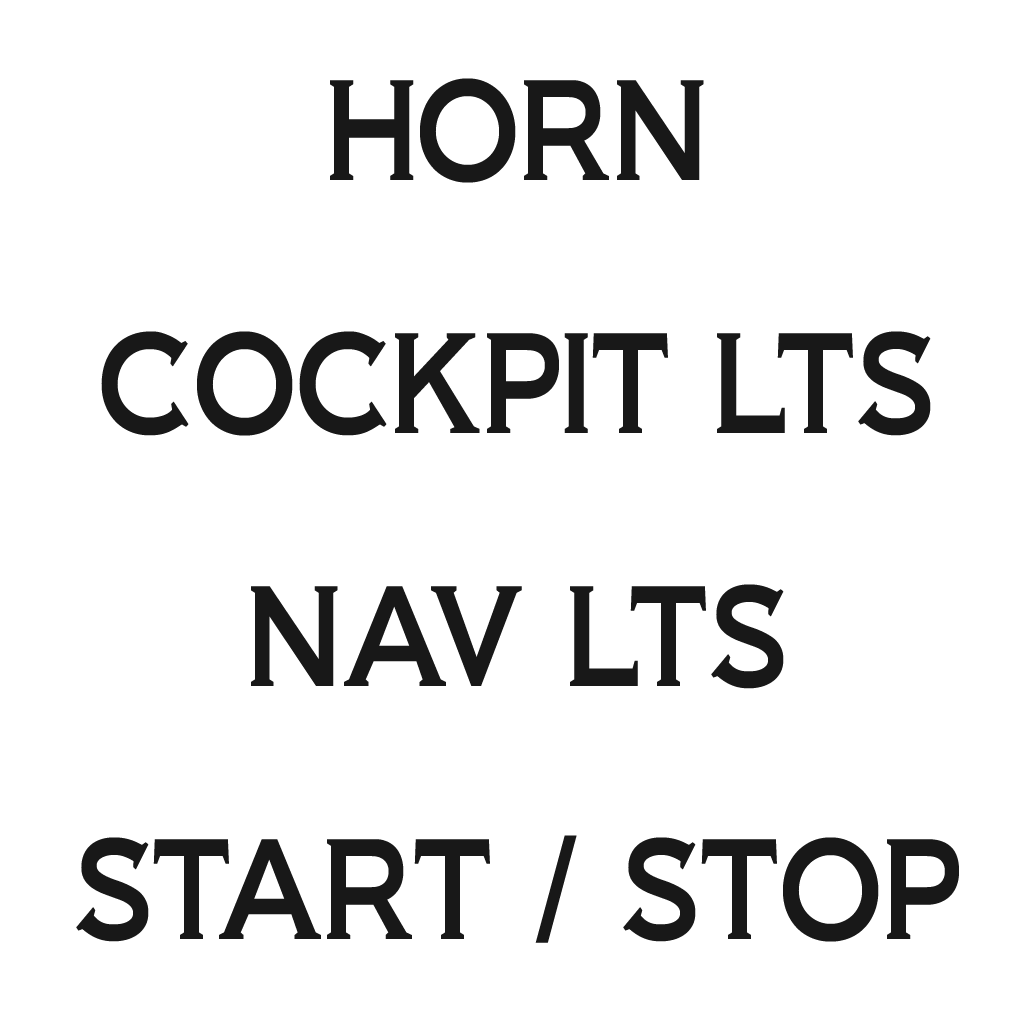
<style>
.page{position:relative;width:1024px;height:1024px;background:#ffffff}
.page>*{position:absolute;margin:0}
.t1{font:134.2px "Biondi";color:#181818;scale:0.78 1}
</style>
<div class="page">
<p class="t1" style="left:330px;top:78px;width:374px;height:105px">HORN</p>
<p class="t1" style="left:101px;top:331px;width:830px;height:105px">COCKPIT LTS</p>
<p class="t1" style="left:251px;top:584px;width:533px;height:105px">NAV LTS</p>
<p class="t1" style="left:76px;top:835px;width:883px;height:108px">START / STOP</p>
</div>
